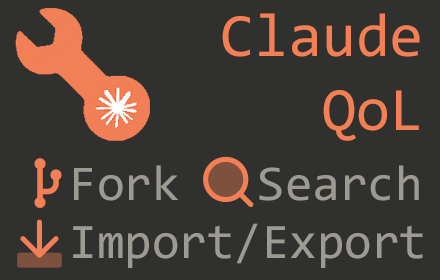
<style>
.page{position:relative;width:440px;height:280px;background:#30302e}
.page>*{position:absolute;margin:0}
.t1{font:61.7px/73.7px "Consolas";letter-spacing:0.001em;color:#f38055}
.t2{font:50px "Consolas";letter-spacing:0.001em;color:#9c9a92}
.t3{font:49.9px "Consolas";letter-spacing:0.001em;color:#9c9a92}
</style>
<div class="page">
<p class="t1" style="left:222px;top:13px;width:198px;height:128px;text-align:right">Claude<br>QoL</p>
<p class="t2" style="left:74px;top:165px;width:105px;height:36px">Fork</p>
<p class="t2" style="left:259px;top:165px;width:160px;height:36px">Search</p>
<p class="t3" style="left:73px;top:223px;width:350px;height:45px">Import/Export</p>
</div>
